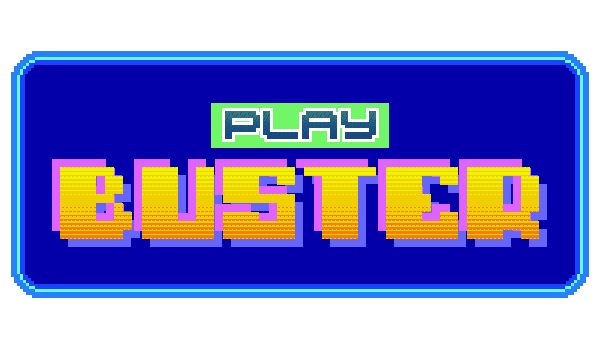
<style>
.page{position:relative;width:600px;height:350px;background:#0300aa}
.page>*{position:absolute;margin:0}
.t1{font:28px "04b20";letter-spacing:0.02em;color:#1f5a80;text-transform:uppercase}
.t2{font:72px "Typo-pixel";letter-spacing:0.02em}
</style>
<div class="page">
<p class="t1" style="left:225px;top:111px;width:151px;height:28px">PLAY</p>
<p class="t2" style="left:52px;top:159px;width:479px;height:72px">BUSTER</p>
<p class="t2" style="left:60px;top:167px;width:479px;height:72px">BUSTER</p>
</div>
